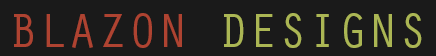
<style>
.page{position:relative;width:436px;height:56px;background:#1a1a1a}
.page>*{position:absolute;margin:0}
.t1{font:50px "OratorStd";color:#abb654}
.t2{font:50px "OratorStd";color:#ae4331}
</style>
<div class="page">
<p class="t1" style="left:14px;top:13px;width:408px;height:35px"><span class="t2">BLAZON </span>DESIGNS</p>
</div>
